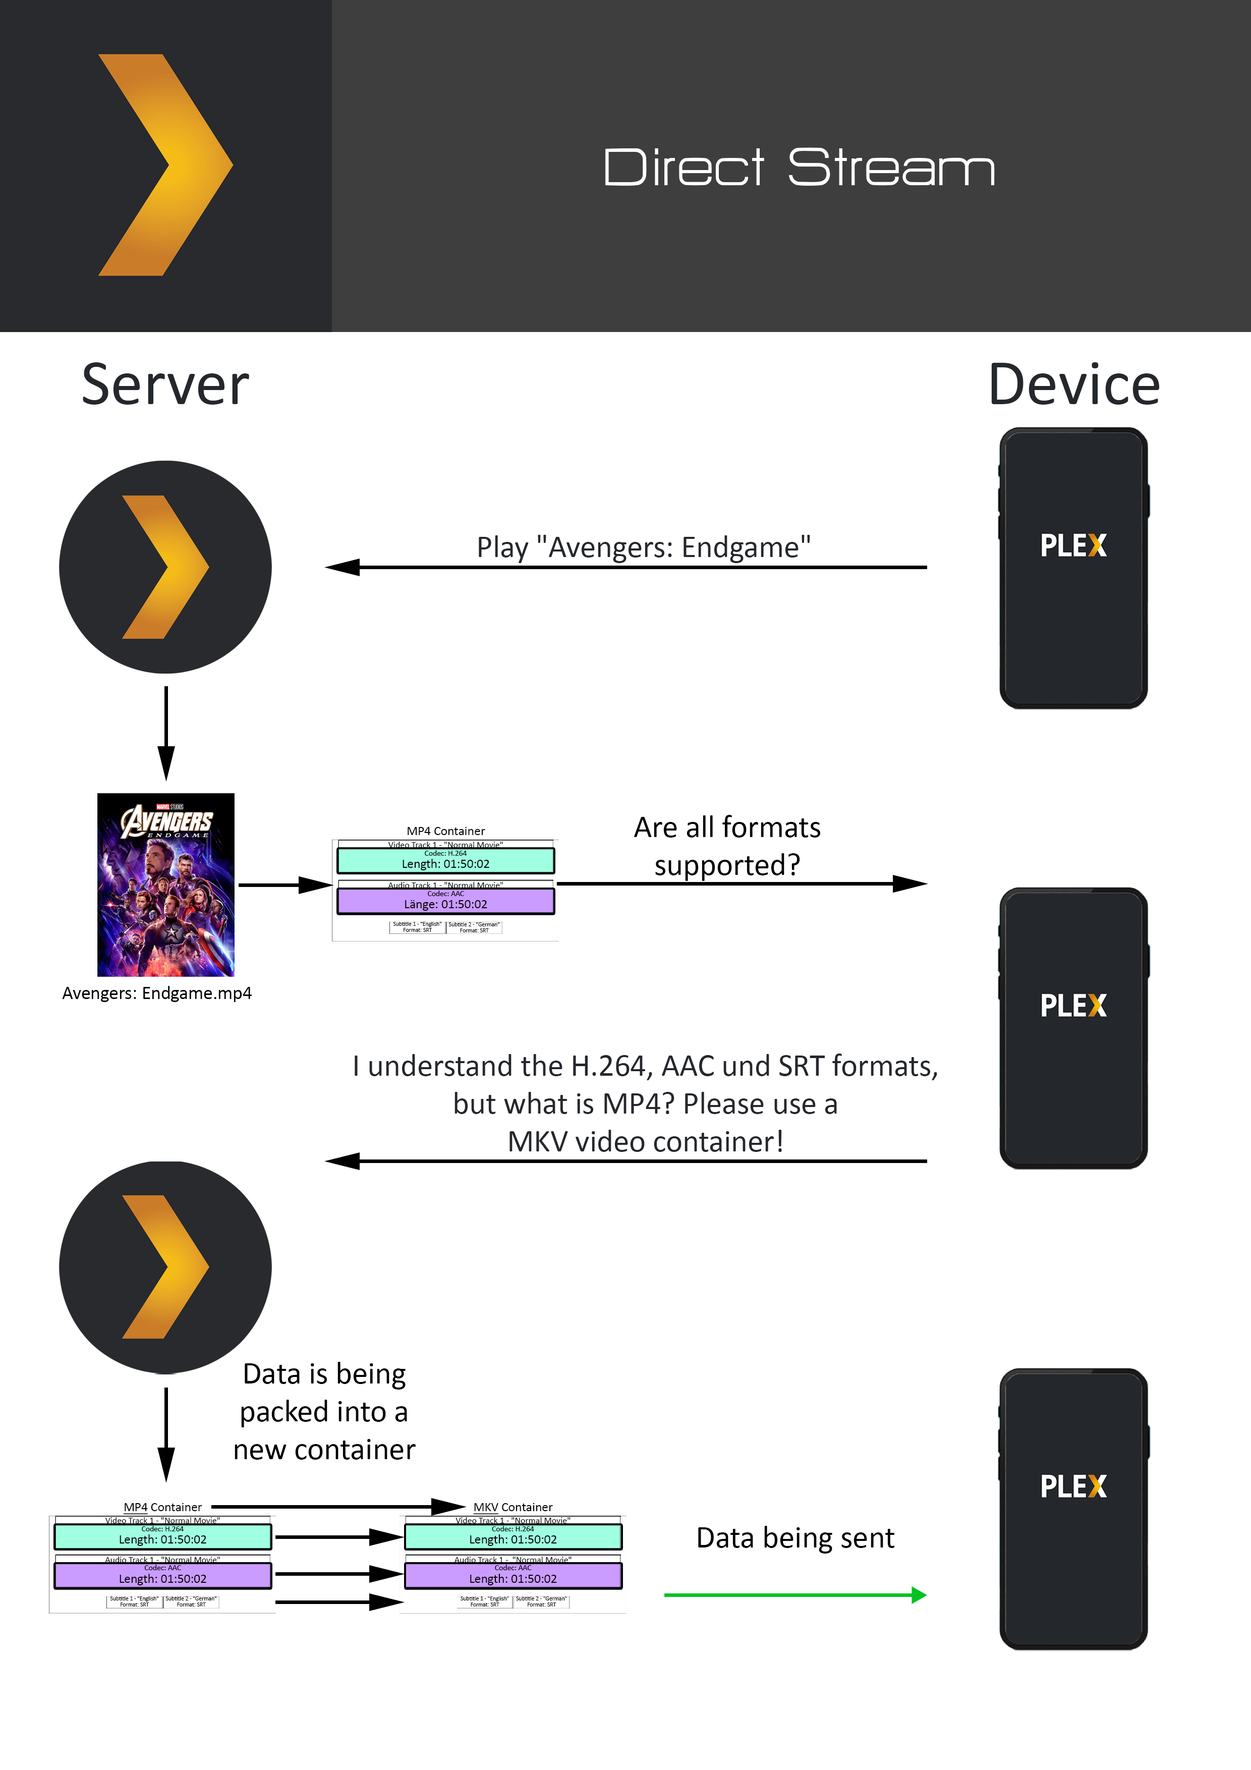
<style>
.page{position:relative;width:1251px;height:1770px;background:#ffffff}
.page>*{position:absolute;margin:0}
.t1{font:65.2px "HURTMOLDPersonalUse-Regular";color:#ffffff}
.t2{font:65.2px "Calibri";color:#24272c}
.t3{font:31.5px "Calibri";color:#24272c}
.t4{font:31.5px "Calibri";color:#000000}
.t5{font:12.9px "Calibri";color:#000000}
.t6{font:9px "Calibri";color:#000000}
.t7{font:7.8px "Calibri";color:#000000}
.t8{font:5.9px "Calibri";color:#000000}
.t9{font:18.9px "Calibri";color:#000000}
.t10{font:12.9px "Calibri";color:#000000;text-decoration:underline}
</style>
<div class="page">
<p class="t1" style="left:605px;top:147px;width:390px;height:39px">Direct Stream</p>
<p class="t2" style="left:83px;top:362px;width:166px;height:43px">Server</p>
<p class="t2" style="left:991px;top:362px;width:168px;height:43px">Device</p>
<p class="t3" style="left:479px;top:535px;width:331px;height:28px">Play "Avengers: Endgame"</p>
<p class="t4" style="left:634px;top:815px;width:187px;height:66px;text-align:center">Are all formats<br>supported?</p>
<p class="t5" style="left:408px;top:827px;width:77px;height:8px">MP4 Container</p>
<p class="t6" style="left:388px;top:841px;width:115px;height:6px">Video Track 1 - "Normal Movie"</p>
<p class="t7" style="left:425px;top:850px;width:42px;height:6px">Codec: H.264</p>
<p class="t5" style="left:403px;top:859px;width:86px;height:11px">Length: 01:50:02</p>
<p class="t6" style="left:388px;top:882px;width:115px;height:6px">Audio Track 1 - "Normal Movie"</p>
<p class="t7" style="left:428px;top:890px;width:36px;height:6px">Codec: AAC</p>
<p class="t5" style="left:405px;top:900px;width:82px;height:11px">Länge: 01:50:02</p>
<p class="t8" style="left:393px;top:922px;width:48px;height:5px">Subtitle 1 - "English"</p>
<p class="t8" style="left:404px;top:928px;width:28px;height:4px">Format: SRT</p>
<p class="t8" style="left:448px;top:922px;width:51px;height:4px">Subtitle 2 - "German"</p>
<p class="t8" style="left:460px;top:928px;width:29px;height:4px">Format: SRT</p>
<p class="t9" style="left:62px;top:986px;width:190px;height:16px">Avengers: Endgame.mp4</p>
<p class="t3" style="left:355px;top:1053px;width:582px;height:99px;text-align:center">I understand the H.264, AAC und SRT formats,<br>but what is MP4? Please use a<br>MKV video container!</p>
<p class="t4" style="left:235px;top:1361px;width:181px;height:98px;text-align:center">Data is being<br>packed into a<br>new container</p>
<p class="t5" style="left:123px;top:1503px;width:79px;height:11px"><span class="t10">MP4</span> Container</p>
<p class="t5" style="left:473px;top:1503px;width:80px;height:11px"><span class="t10">MKV</span> Container</p>
<p class="t6" style="left:105px;top:1517px;width:115px;height:6px">Video Track 1 - "Normal Movie"</p>
<p class="t6" style="left:456px;top:1517px;width:115px;height:6px">Video Track 1 - "Normal Movie"</p>
<p class="t7" style="left:142px;top:1525px;width:42px;height:6px">Codec: H.264</p>
<p class="t7" style="left:492px;top:1525px;width:42px;height:6px">Codec: H.264</p>
<p class="t4" style="left:698px;top:1525px;width:197px;height:28px">Data being sent</p>
<p class="t5" style="left:120px;top:1534px;width:86px;height:12px">Length: 01:50:02</p>
<p class="t5" style="left:470px;top:1534px;width:87px;height:12px">Length: 01:50:02</p>
<p class="t6" style="left:105px;top:1556px;width:115px;height:6px">Audio Track 1 - "Normal Movie"</p>
<p class="t7" style="left:144px;top:1564px;width:37px;height:6px">Codec: AAC</p>
<p class="t6" style="left:454px;top:1556px;width:118px;height:6px">Audio Track 1 -  "Normal Movie"</p>
<p class="t7" style="left:495px;top:1564px;width:37px;height:6px">Codec: AAC</p>
<p class="t5" style="left:120px;top:1573px;width:86px;height:12px">Length: 01:50:02</p>
<p class="t5" style="left:470px;top:1573px;width:87px;height:12px">Length: 01:50:02</p>
<p class="t8" style="left:110px;top:1596px;width:48px;height:5px">Subtitle 1 - "English"</p>
<p class="t8" style="left:165px;top:1596px;width:51px;height:4px">Subtitle 2 - "German"</p>
<p class="t8" style="left:461px;top:1596px;width:48px;height:5px">Subtitle 1 - "English"</p>
<p class="t8" style="left:516px;top:1596px;width:51px;height:4px">Subtitle 2 - "German"</p>
<p class="t8" style="left:121px;top:1602px;width:28px;height:4px">Format: SRT</p>
<p class="t8" style="left:177px;top:1602px;width:29px;height:4px">Format: SRT</p>
<p class="t8" style="left:471px;top:1602px;width:28px;height:4px">Format: SRT</p>
<p class="t8" style="left:528px;top:1602px;width:28px;height:4px">Format: SRT</p>
</div>
